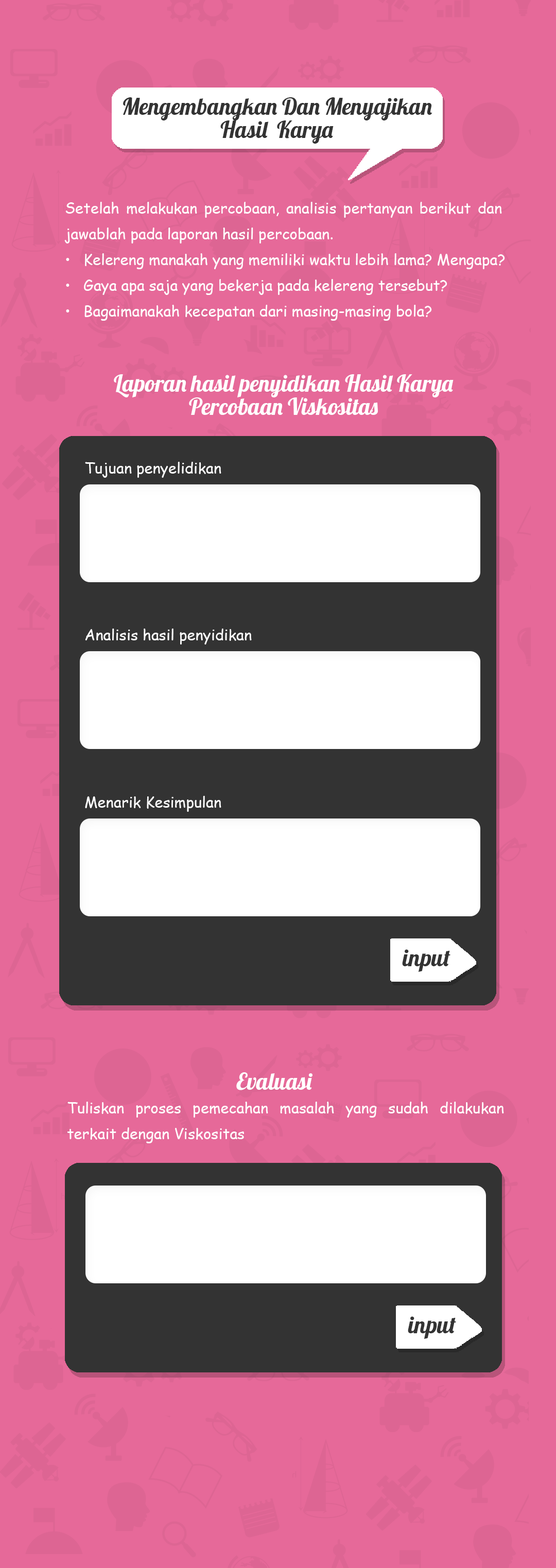
<style>
.page{position:relative;width:556px;height:1568px;background:#e66999}
.page>*{position:absolute;margin:0}
.t1{font:22.9px/22.9px "Lobster-Regular";color:#333333}
.t2{font:15px/25.7px "ComicSansMS";color:#ffffff}
.t3{font:22.9px/22.9px "Lobster-Regular";color:#ffffff}
.t4{font:15px "ComicSansMS";color:#ffffff}
.t5{font:23.6px "Lobster-Regular";color:#333333}
.t6{font:22.9px "Lobster-Regular";color:#ffffff}
</style>
<div class="page">
<p class="t1" style="left:123px;top:97px;width:309px;height:47px;text-align:center">Mengembangkan Dan Menyajikan<br>Hasil  Karya</p>
<p class="t2" style="left:64px;top:202px;width:441px;height:119px;text-align:justify">Setelah melakukan percobaan, analisis pertanyan berikut dan jawablah pada laporan hasil percobaan. <br>• Kelereng manakah yang memiliki waktu lebih lama? Mengapa?<br>• Gaya apa saja yang bekerja pada kelereng tersebut?<br>• Bagaimanakah kecepatan dari masing-masing bola?</p>
<p class="t3" style="left:114px;top:374px;width:340px;height:41px;text-align:center">Laporan hasil penyidikan Hasil Karya Percobaan Viskositas</p>
<p class="t4" style="left:85px;top:462px;width:136px;height:16px">Tujuan penyelidikan</p>
<p class="t4" style="left:85px;top:629px;width:167px;height:15px">Analisis hasil penyidikan</p>
<p class="t4" style="left:85px;top:796px;width:136px;height:16px">Menarik Kesimpulan</p>
<p class="t5" style="left:402px;top:949px;width:48px;height:23px">input</p>
<p class="t6" style="left:236px;top:1072px;width:76px;height:18px">Evaluasi</p>
<p class="t2" style="left:67px;top:1102px;width:437px;height:41px;text-align:justify">Tuliskan proses pemecahan masalah yang sudah dilakukan terkait dengan Viskositas</p>
<p class="t5" style="left:408px;top:1316px;width:48px;height:23px">input</p>
</div>
